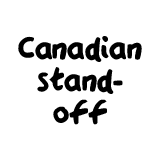
<style>
.page{position:relative;width:160px;height:160px;background:#ffffff}
.page>*{position:absolute;margin:0}
.t1{font:35.9px/31.9px "QAReports";color:#000000}
</style>
<div class="page">
<p class="t1" style="left:18px;top:36px;width:124px;height:89px;text-align:center">Canadian<br>stand-<br>off</p>
</div>
